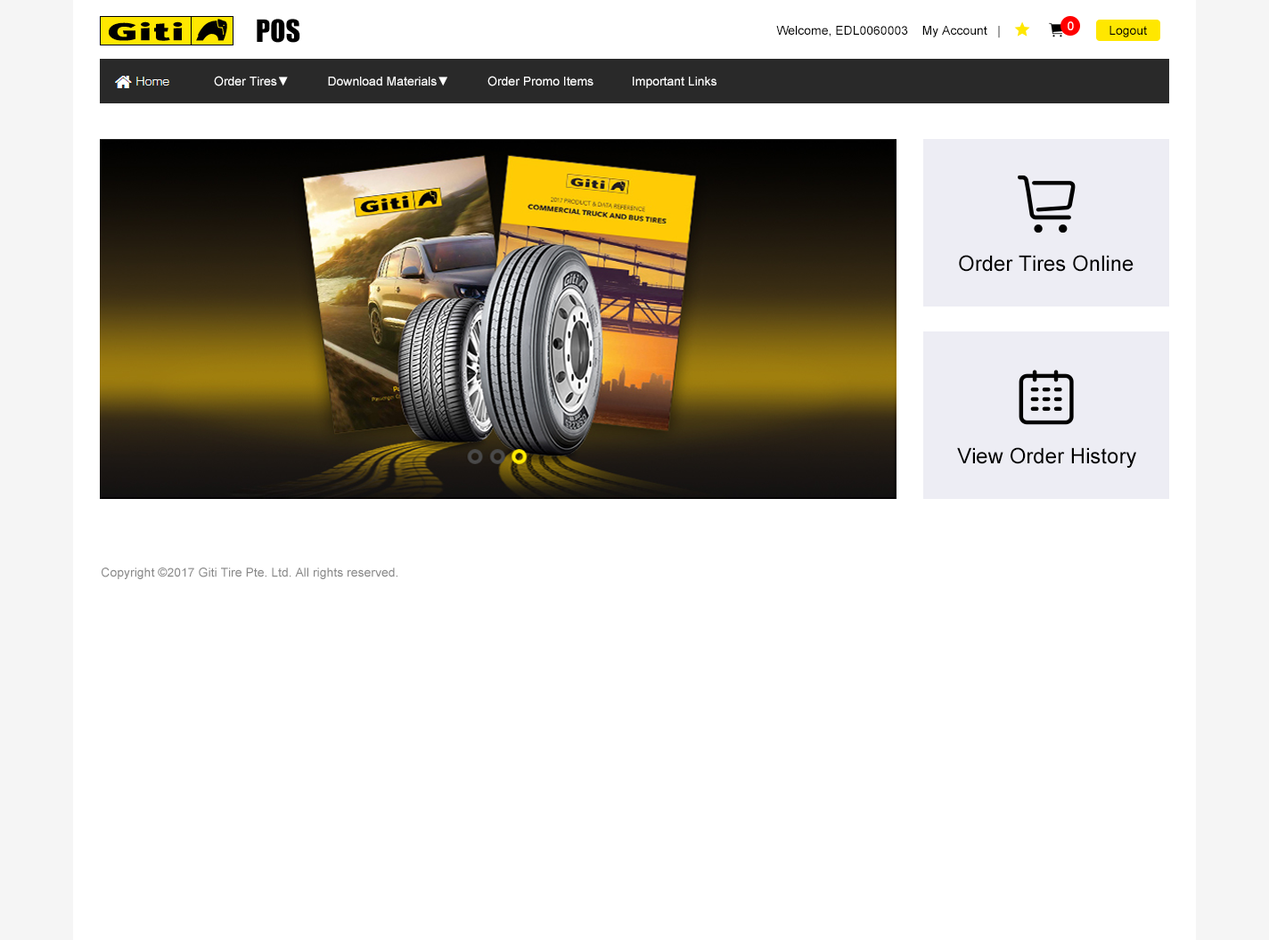
<style>
.page{position:relative;width:1269px;height:940px;background:#ffffff}
.page>*{position:absolute;margin:0}
.t1{font:28.5px "Impact";color:#000000}
.t2{font:12.5px "ArialMT";color:#000000}
.t3{font:12.5px "ArialMT";color:#ffffff}
.t4{font:21.4px "ArialMT";color:#000000}
.t5{font:12.5px "ArialMT";color:#898989}
</style>
<div class="page">
<p class="t1" style="left:257px;top:19px;width:43px;height:24px">POS</p>
<p class="t2" style="left:776px;top:26px;width:224px;height:12px">Welcome, EDL0060003    My Account   |</p>
<p class="t3" style="left:1067px;top:21px;width:7px;height:9px">0</p>
<p class="t2" style="left:1109px;top:26px;width:38px;height:11px">Logout</p>
<p class="t3" style="left:214px;top:76px;width:502px;height:12px">Order Tires▼           Download Materials▼           Order Promo Items           Important Links</p>
<p class="t4" style="left:959px;top:255px;width:174px;height:17px">Order Tires Online</p>
<p class="t4" style="left:957px;top:447px;width:179px;height:21px">View Order History</p>
<p class="t5" style="left:102px;top:568px;width:295px;height:11px">Copyright ©2017 Giti Tire Pte. Ltd. All rights reserved.</p>
</div>
